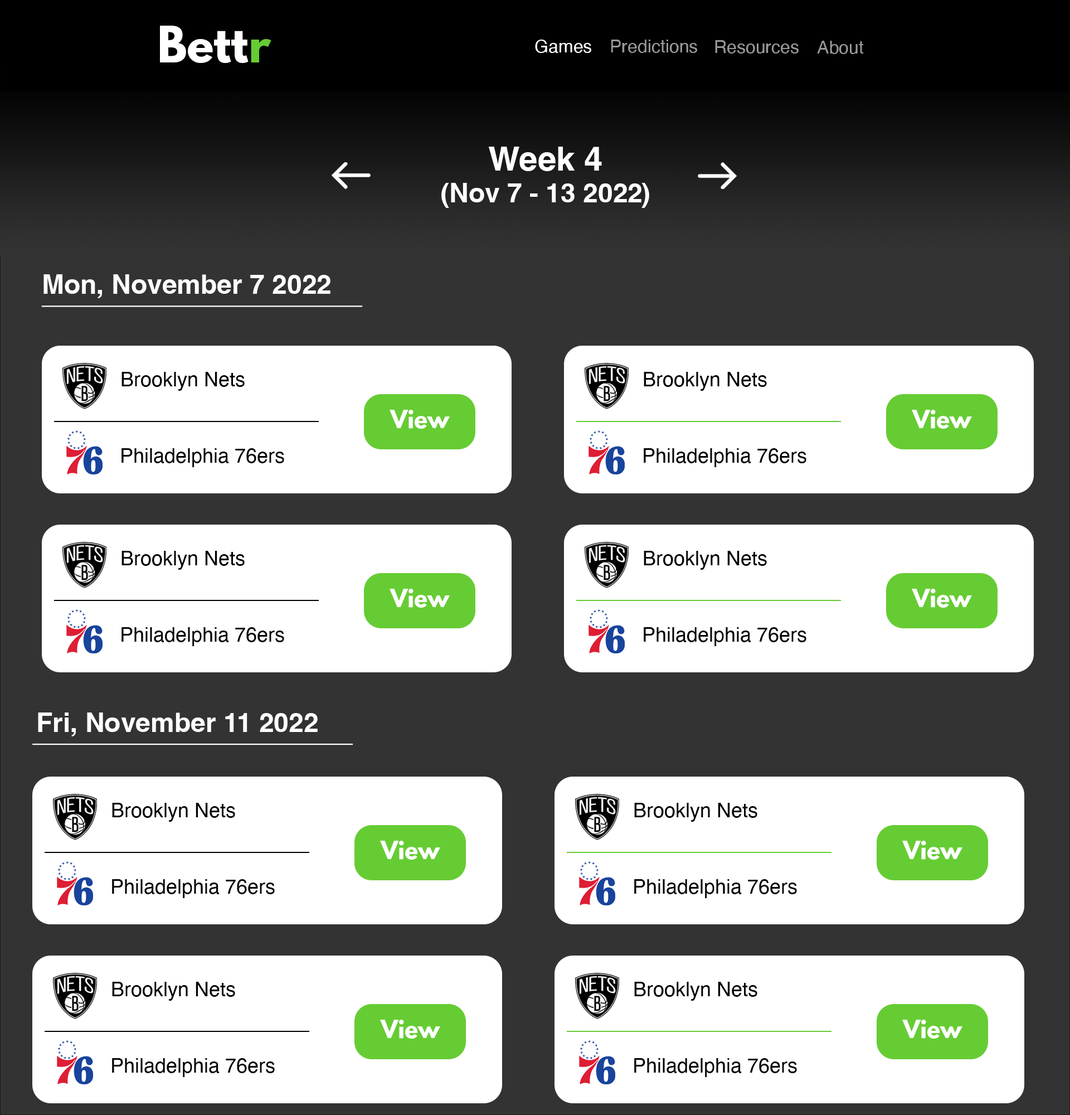
<style>
.page{position:relative;width:1070px;height:1115px;background:#ffffff}
.page>*{position:absolute;margin:0}
.t1{font:44.6px "LeagueSpartan-Bold";color:#ffffff}
.t2{font:44.6px "LeagueSpartan-Bold";color:#66cc33}
.t3{font:17.8px "Helvetica";color:#ffffff}
.t4{font:17.8px "Helvetica";color:#999999}
.t5{font:26.7px "Helvetica-Bold";color:#ffffff}
.t6{font:33.4px "Helvetica-Bold";color:#ffffff}
.t7{font:20.1px "Helvetica";color:#000000}
.t8{font:22.3px "LeagueSpartan-Bold";color:#ffffff}
.t9{font:26.8px "Helvetica-Bold";color:#ffffff}
</style>
<div class="page">
<p class="t1" style="left:160px;top:26px;width:111px;height:37px">Bett<span class="t2">r</span></p>
<p class="t3" style="left:535px;top:40px;width:56px;height:13px">Games</p>
<p class="t4" style="left:611px;top:40px;width:86px;height:13px">Predictions</p>
<p class="t4" style="left:715px;top:40px;width:84px;height:13px">Resources</p>
<p class="t4" style="left:817px;top:41px;width:47px;height:13px">About</p>
<p class="t5" style="left:441px;top:147px;width:208px;height:61px;text-align:center"><span class="t6">Week 4 <br></span>(Nov 7 - 13 2022)</p>
<p class="t5" style="left:43px;top:274px;width:287px;height:24px">Mon, November 7 2022</p>
<p class="t7" style="left:121px;top:372px;width:124px;height:19px">Brooklyn Nets</p>
<p class="t7" style="left:644px;top:372px;width:123px;height:19px">Brooklyn Nets</p>
<p class="t8" style="left:390px;top:410px;width:60px;height:19px">View</p>
<p class="t8" style="left:912px;top:410px;width:60px;height:19px">View</p>
<p class="t7" style="left:121px;top:448px;width:163px;height:19px">Philadelphia 76ers</p>
<p class="t7" style="left:644px;top:448px;width:162px;height:19px">Philadelphia 76ers</p>
<p class="t7" style="left:121px;top:551px;width:124px;height:19px">Brooklyn Nets</p>
<p class="t7" style="left:644px;top:551px;width:123px;height:19px">Brooklyn Nets</p>
<p class="t8" style="left:390px;top:588px;width:60px;height:19px">View</p>
<p class="t8" style="left:912px;top:588px;width:60px;height:19px">View</p>
<p class="t7" style="left:121px;top:627px;width:163px;height:19px">Philadelphia 76ers</p>
<p class="t7" style="left:644px;top:627px;width:162px;height:19px">Philadelphia 76ers</p>
<p class="t9" style="left:38px;top:712px;width:280px;height:24px">Fri, November 11 2022</p>
<p class="t7" style="left:112px;top:802px;width:123px;height:19px">Brooklyn Nets</p>
<p class="t7" style="left:634px;top:802px;width:123px;height:19px">Brooklyn Nets</p>
<p class="t8" style="left:380px;top:840px;width:60px;height:19px">View</p>
<p class="t8" style="left:902px;top:840px;width:60px;height:19px">View</p>
<p class="t7" style="left:112px;top:879px;width:163px;height:19px">Philadelphia 76ers</p>
<p class="t7" style="left:634px;top:879px;width:163px;height:19px">Philadelphia 76ers</p>
<p class="t7" style="left:112px;top:981px;width:123px;height:19px">Brooklyn Nets</p>
<p class="t7" style="left:634px;top:981px;width:123px;height:19px">Brooklyn Nets</p>
<p class="t8" style="left:380px;top:1019px;width:60px;height:19px">View</p>
<p class="t8" style="left:902px;top:1019px;width:60px;height:19px">View</p>
<p class="t7" style="left:112px;top:1058px;width:163px;height:19px">Philadelphia 76ers</p>
<p class="t7" style="left:634px;top:1058px;width:163px;height:19px">Philadelphia 76ers</p>
</div>
